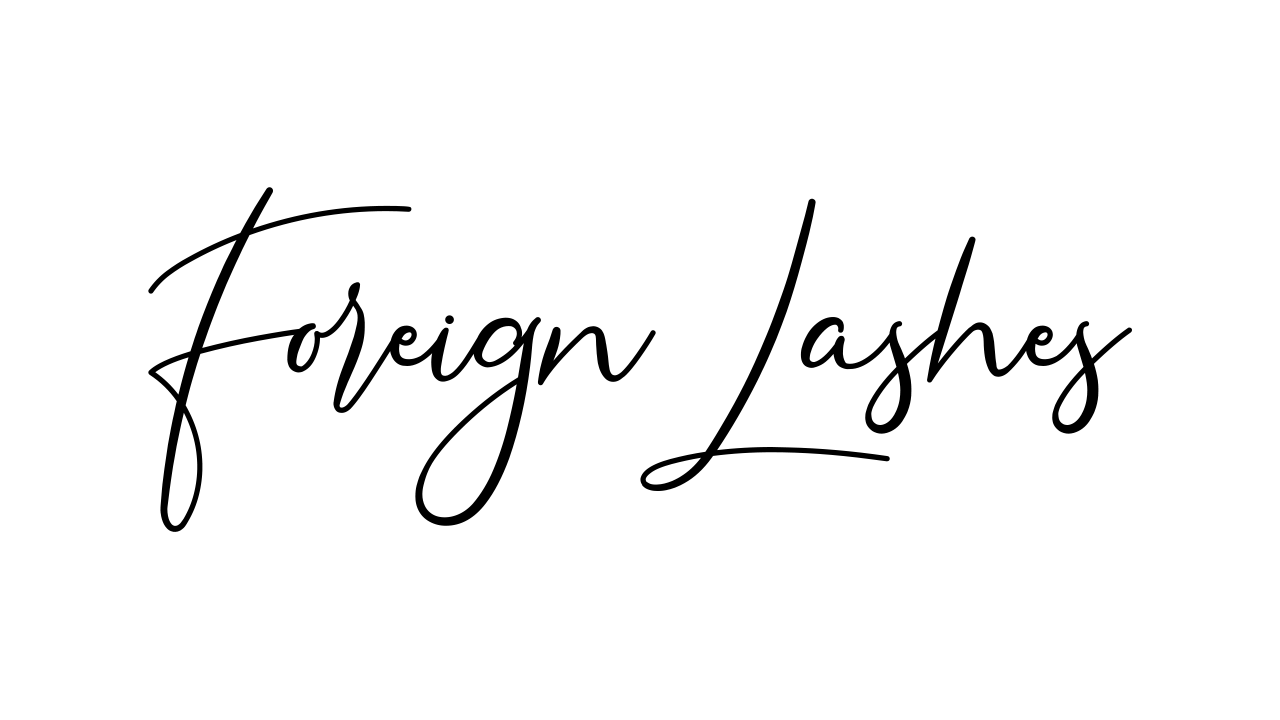
<style>
.page{position:relative;width:1280px;height:720px;background:#ffffff}
.page>*{position:absolute;margin:0}
.t1{font:200px "AmericansClassy";color:#000000}
</style>
<div class="page">
<p class="t1" style="left:148px;top:187px;width:984px;height:345px">ForeignLashes</p>
</div>
